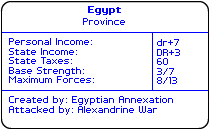
<style>
.page{position:relative;width:210px;height:130px;background:#ffffff}
.page>*{position:absolute;margin:0}
.t1{font:8px "PFTempestaSeven-Bold";color:#0000ff}
.t2{font:8px "PFTempestaSeven";color:#0000ff}
</style>
<div class="page">
<p class="t1" style="left:88px;top:6px;width:33px;height:9px">Egypt</p>
<p class="t2" style="left:83px;top:18px;width:42px;height:7px">Province</p>
<p class="t2" style="left:9px;top:38px;width:85px;height:45px">Personal Income:<br>State Income:<br>State Taxes:<br>Base Strength:<br>Maximum Forces:</p>
<p class="t2" style="left:157px;top:39px;width:23px;height:45px">dr+7<br>DR+3<br>60<br>3/7<br>8/13</p>
<p class="t2" style="left:9px;top:96px;width:164px;height:19px">Created by: Egyptian Annexation<br>Attacked by: Alexandrine War</p>
</div>
